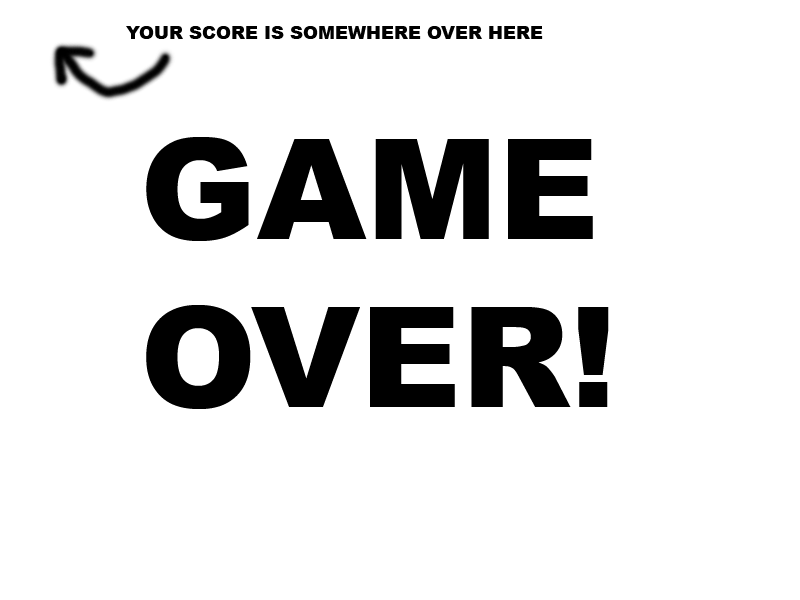
<style>
.page{position:relative;width:800px;height:600px;background:#ffffff}
.page>*{position:absolute;margin:0}
.t1{font:18px "Arial-Black";color:#000000}
.t2{font:140px "Arial-Black";color:#000000}
</style>
<div class="page">
<p class="t1" style="left:126px;top:26px;width:417px;height:13px">YOUR SCORE IS SOMEWHERE OVER HERE</p>
<p class="t2" style="left:146px;top:137px;width:463px;height:272px">GAME<br>OVER!</p>
</div>
